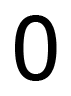
<style>
.page{position:relative;width:71px;height:96px;background:#ffffff}
.page>*{position:absolute;margin:0}
.t1{font:89.4px "MicrosoftSansSerif";color:#000000}
</style>
<div class="page">
<p class="t1" style="left:15px;top:15px;width:42px;height:66px">0</p>
</div>
